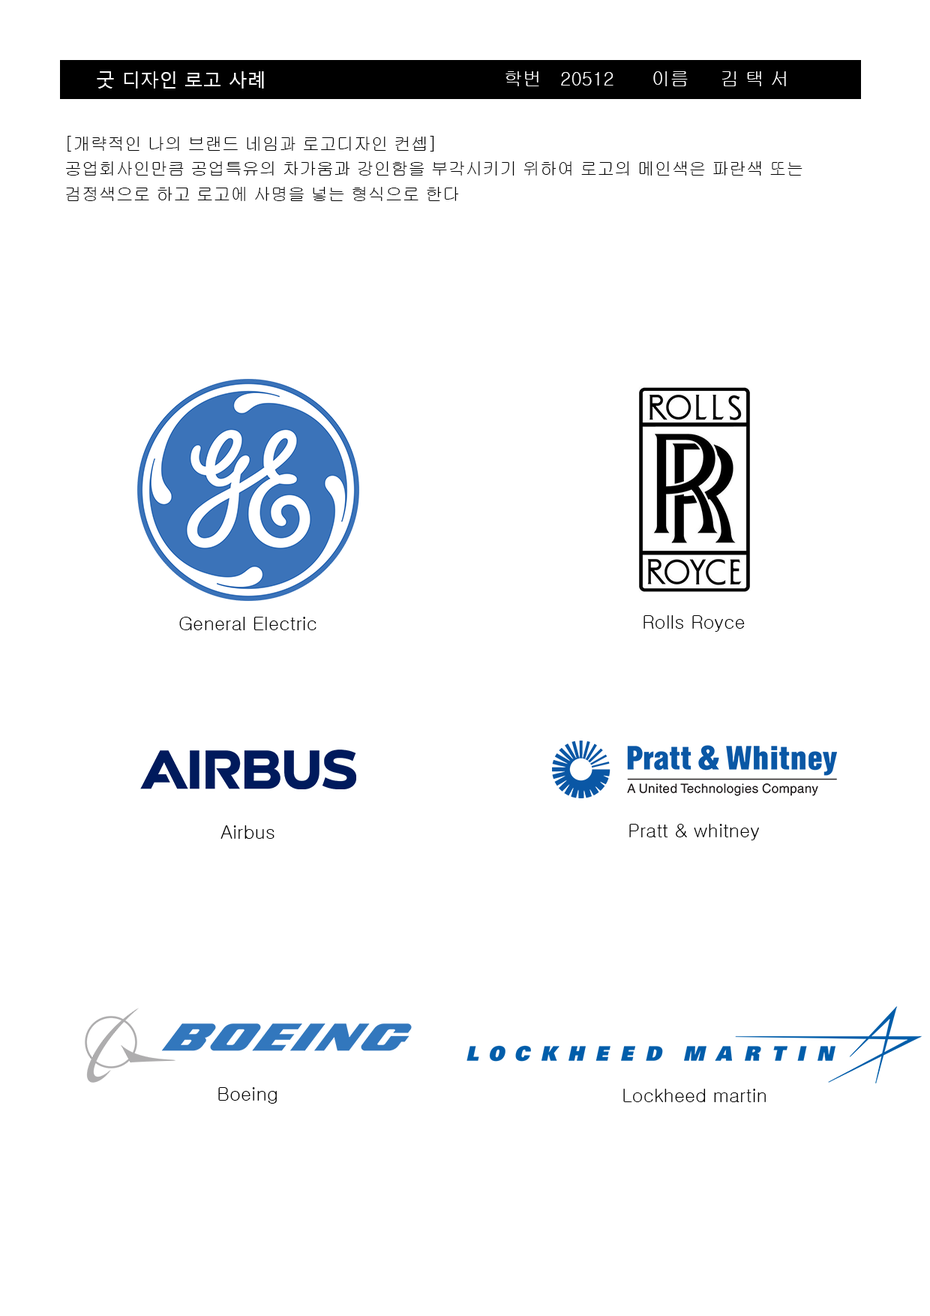
<style>
.page{position:relative;width:930px;height:1316px;background:#ffffff}
.page>*{position:absolute;margin:0}
.t1{font:18.8px "MalgunGothicRegular";color:#ffffff}
.t2{font:18.8px "Gulim";color:#ffffff}
.t3{font:17.2px/25px "Gulim";color:#010101}
.t4{font:9px "Gulim";color:#000000}
</style>
<div class="page">
<p class="t1" style="left:97px;top:71px;width:167px;height:17px">굿 디자인 로고 사례</p>
<p class="t2" style="left:506px;top:71px;width:280px;height:15px">학번   20512      이름     김 택 서</p>
<p class="t3" style="left:66px;top:136px;width:736px;height:65px">[개략적인 나의 브랜드 네임과 로고디자인 컨셉]<br>공업회사인만큼 공업특유의 차가움과 강인함을 부각시키기 위하여 로고의 메인색은 파란색 또는<br>검정색으로 하고 로고에 사명을 넣는 형식으로 한다</p>
<p class="t4" style="left:179px;top:616px;width:137px;height:14px">General Electric</p>
<p class="t4" style="left:644px;top:615px;width:101px;height:17px">Rolls Royce</p>
<p class="t4" style="left:220px;top:825px;width:54px;height:13px">Airbus</p>
<p class="t4" style="left:629px;top:824px;width:130px;height:16px">Pratt &amp; whitney</p>
<p class="t4" style="left:218px;top:1087px;width:59px;height:16px">Boeing</p>
<p class="t4" style="left:623px;top:1088px;width:143px;height:14px">Lockheed martin</p>
</div>
